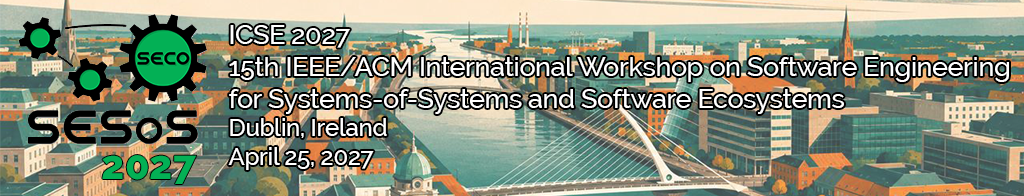
<style>
.page{position:relative;width:1024px;height:196px}
.page>*{position:absolute;margin:0}
.t1{font:26.7px "Raleway-Medium";letter-spacing:-0.01em;color:#ffffff}
.t2{font:24px "Raleway-Medium";letter-spacing:-0.01em;color:#ffffff}
.t3{font:40px "Raleway-ExtraBold";letter-spacing:0.002em;color:#03b055}
</style>
<div class="page">
<p class="t1" style="left:228px;top:25px;width:781px;height:145px">ICSE 2027<br>15th IEEE/ACM International Workshop on Software Engineering<br>for Systems-of-Systems and Software Ecosystems<br><span class="t2">Dublin, Ireland<br>April 25, 2027</span></p>
<p class="t3" style="left:102px;top:155px;width:95px;height:29px">2027</p>
</div>
